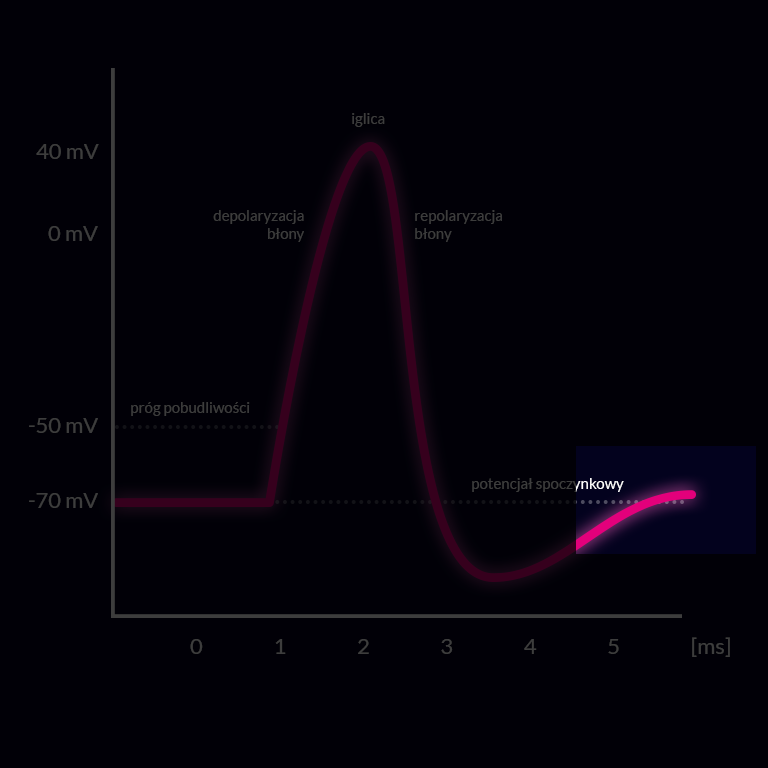
<style>
.page{position:relative;width:768px;height:768px;background:#010007}
.page>*{position:absolute;margin:0}
.t1{font:15px "Lato-Regular";color:#3d3d3d}
.t2{font:21.8px "Lato-Regular";color:#3d3d3d}
</style>
<div class="page">
<p class="t1" style="left:352px;top:113px;width:33px;height:14px">iglica</p>
<p class="t2" style="left:36px;top:144px;width:63px;height:15px">40 mV</p>
<p class="t1" style="left:213px;top:210px;width:91px;height:32px;text-align:right">depolaryzacja<br>błony</p>
<p class="t1" style="left:415px;top:210px;width:87px;height:32px">repolaryzacja<br>błony</p>
<p class="t2" style="left:48px;top:226px;width:50px;height:15px">0 mV</p>
<p class="t1" style="left:131px;top:402px;width:119px;height:14px">próg pobudliwości</p>
<p class="t2" style="left:29px;top:418px;width:69px;height:15px">-50 mV</p>
<p class="t1" style="left:472px;top:478px;width:152px;height:14px">potencjał spoczynkowy</p>
<p class="t2" style="left:29px;top:493px;width:69px;height:15px">-70 mV</p>
<p class="t2" style="left:190px;top:637px;width:540px;height:20px">0  1  2  3  4  5   [ms]</p>
</div>
